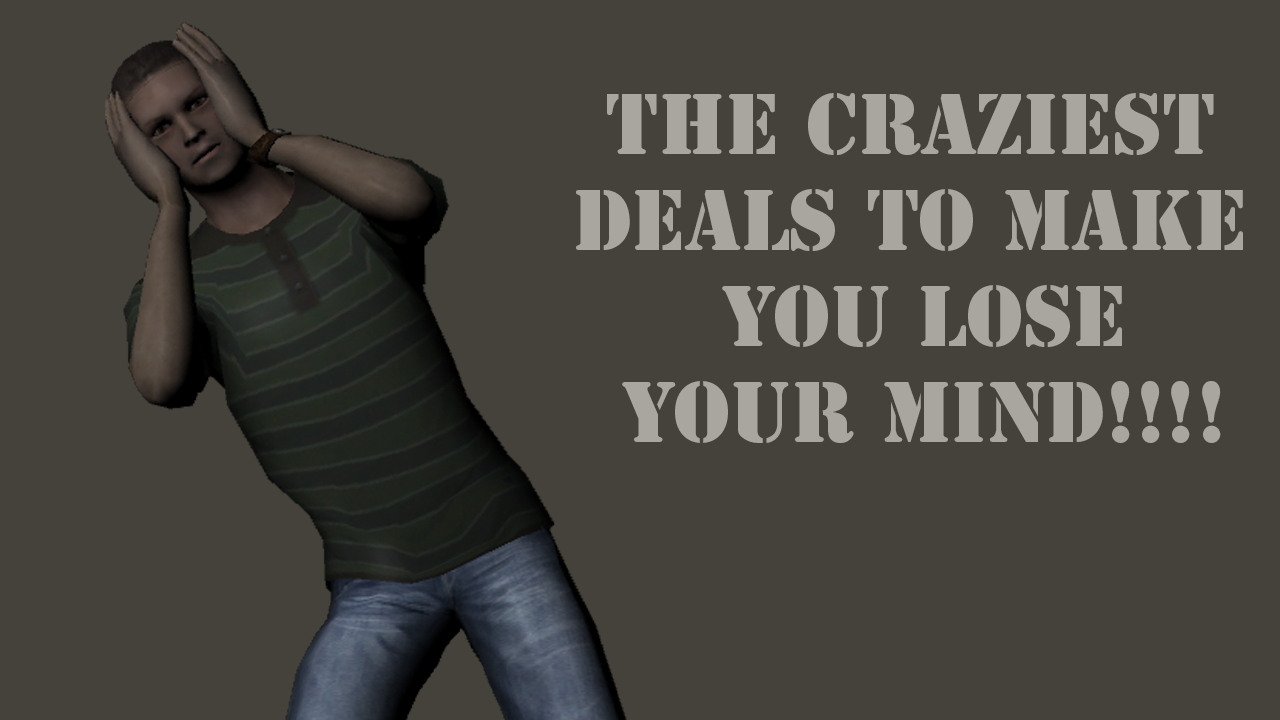
<style>
.page{position:relative;width:1280px;height:720px;background:#45423b}
.page>*{position:absolute;margin:0}
.t1{font:80px "StencilStd";color:#a8a69f}
</style>
<div class="page">
<p class="t1" style="left:576px;top:93px;width:667px;height:350px;text-align:center">THE CRAZIEST <br>DEALS TO MAKE <br>YOU LOSE<br>YOUR MIND!!!!</p>
</div>
